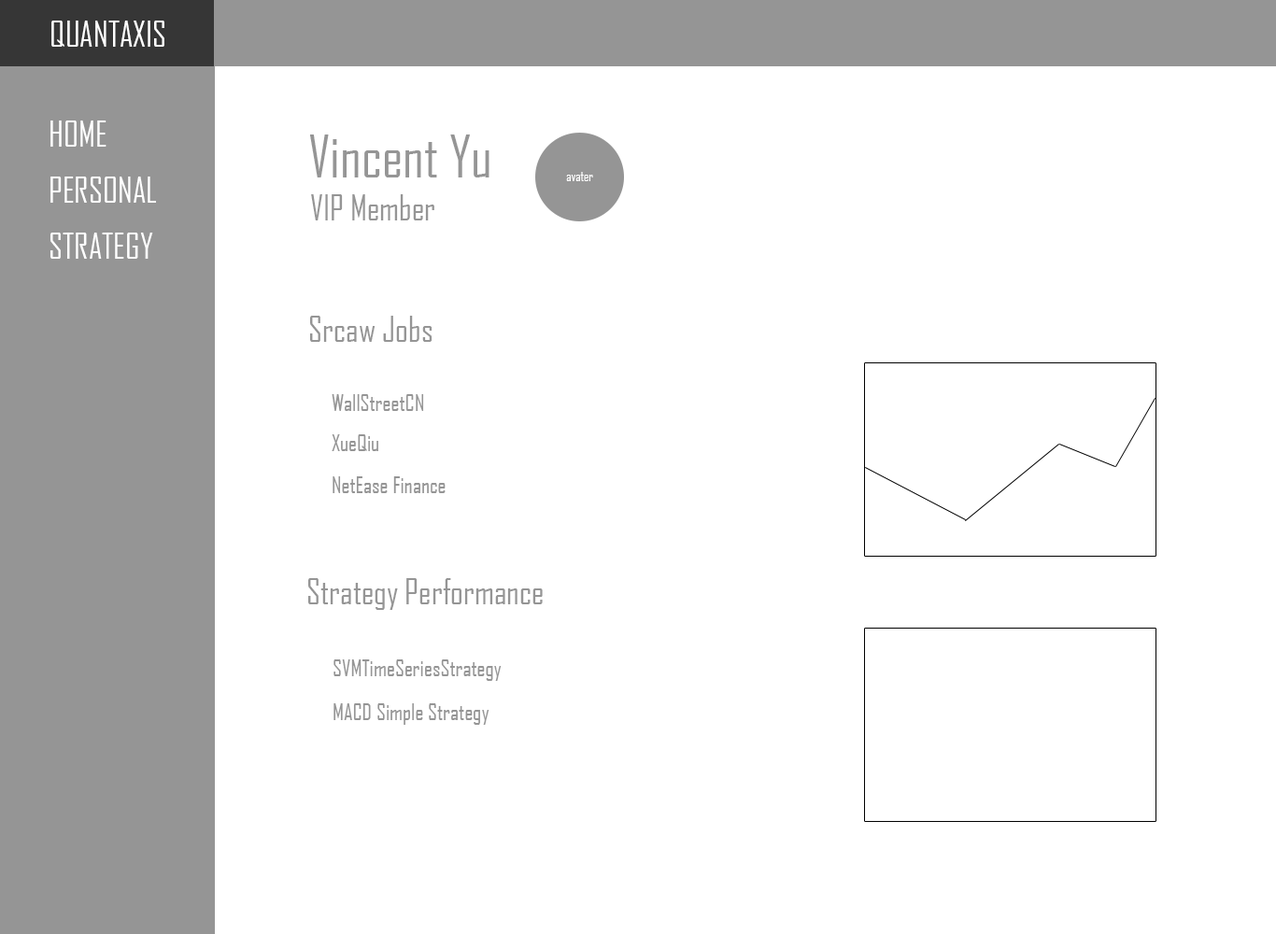
<style>
.page{position:relative;width:1276px;height:934px;background:#ffffff}
.page>*{position:absolute;margin:0}
.t1{font:33.6px "AgencyFB-Reg";color:#ffffff}
.t2{font:56.1px "AgencyFB-Reg";color:#959595}
.t3{font:13.1px "AgencyFB-Reg";color:#ffffff}
.t4{font:33.6px "AgencyFB-Reg";color:#959595}
.t5{font:22.4px "AgencyFB-Reg";color:#959595}
</style>
<div class="page">
<p class="t1" style="left:51px;top:21px;width:113px;height:26px">QUANTAXIS</p>
<p class="t1" style="left:50px;top:121px;width:57px;height:26px">HOME</p>
<p class="t2" style="left:309px;top:135px;width:181px;height:43px">Vincent Yu</p>
<p class="t3" style="left:566px;top:172px;width:27px;height:9px">avater</p>
<p class="t1" style="left:50px;top:177px;width:106px;height:26px">PERSONAL</p>
<p class="t4" style="left:311px;top:194px;width:123px;height:26px">VIP Member</p>
<p class="t1" style="left:50px;top:233px;width:103px;height:26px">STRATEGY</p>
<p class="t4" style="left:310px;top:316px;width:123px;height:26px">Srcaw Jobs</p>
<p class="t5" style="left:332px;top:394px;width:92px;height:17px">WallStreetCN</p>
<p class="t5" style="left:332px;top:434px;width:46px;height:17px">XueQiu</p>
<p class="t5" style="left:333px;top:476px;width:113px;height:17px">NetEase Finance</p>
<p class="t4" style="left:308px;top:578px;width:235px;height:32px">Strategy Performance</p>
<p class="t5" style="left:334px;top:660px;width:168px;height:21px">SVMTimeSeriesStrategy</p>
<p class="t5" style="left:334px;top:704px;width:156px;height:21px">MACD Simple Strategy</p>
</div>
